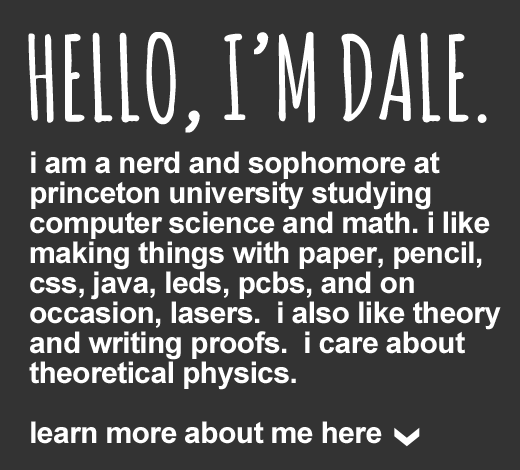
<style>
.page{position:relative;width:520px;height:470px;background:#333333}
.page>*{position:absolute;margin:0}
.t1{font:115px "AmaticSC-Bold";color:#ffffff;text-transform:uppercase}
.t2{font:30px/30px "Arial-BoldMT";letter-spacing:-0.02em;color:#ffffff}
</style>
<div class="page">
<p class="t1" style="left:28px;top:31px;width:459px;height:102px">Hello, I’m dale.</p>
<p class="t2" style="left:29px;top:151px;width:472px;height:293px">i am a nerd and sophomore at princeton university studying computer science and math. i like making things with paper, pencil, css, java, leds, pcbs, and on <br>occasion, lasers.  i also like theory and writing proofs.  i care about theoretical physics. <br><br>learn more about me here</p>
</div>
